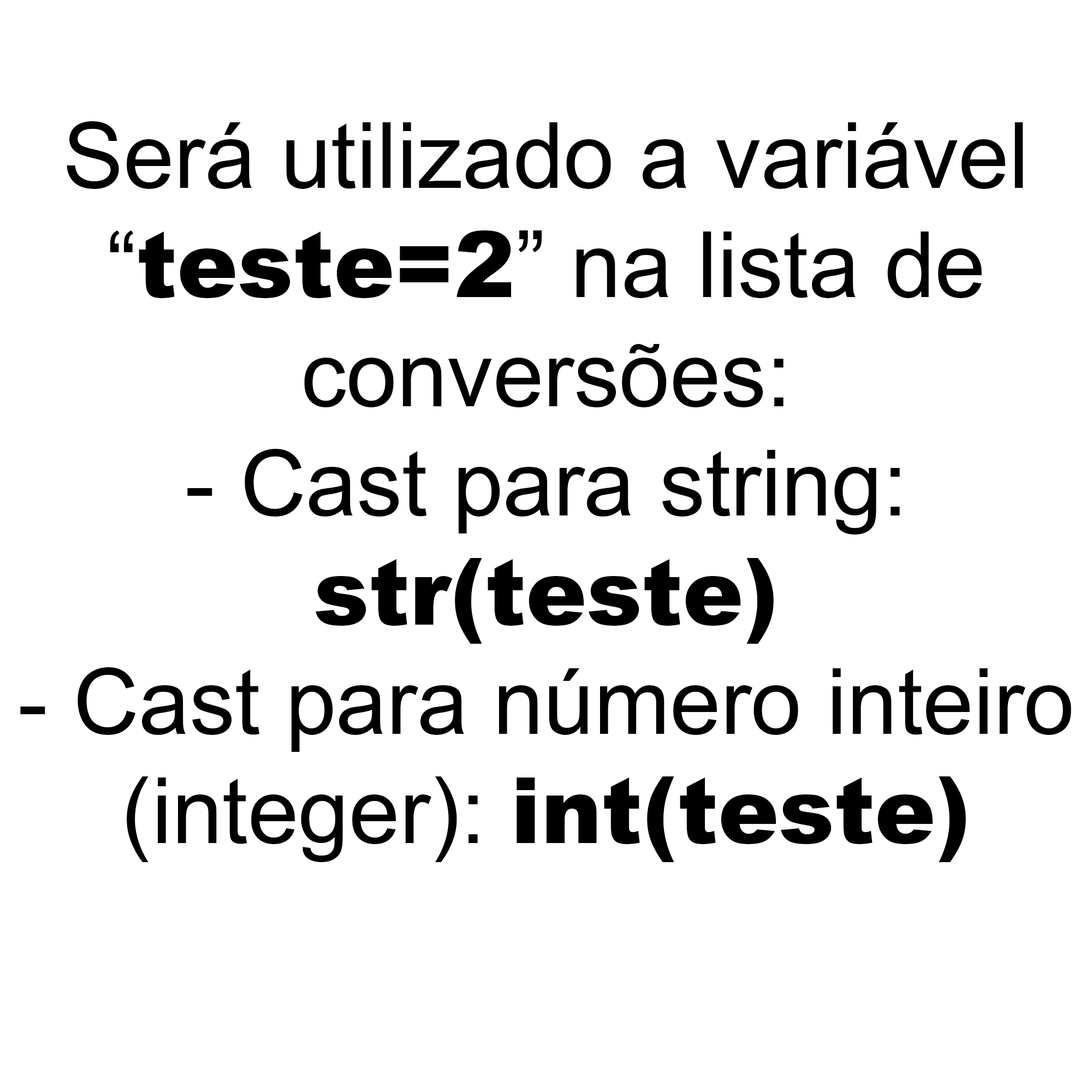
<style>
.page{position:relative;width:1092px;height:1092px;background:#ffffff}
.page>*{position:absolute;margin:0}
.t1{font:91px "ArialMT";color:#000000}
.t2{font:91px "Arial-Black";color:#000000}
</style>
<div class="page">
<p class="t1" style="left:20px;top:121px;width:1051px;height:741px;text-align:center">Será utilizado a variável<br>“<span class="t2">teste=2</span>” na lista de<br>conversões:<br>- Cast para string:<br><span class="t2">str(teste)</span><br>- Cast para número inteiro<br>(integer): <span class="t2">int(teste)</span></p>
</div>
